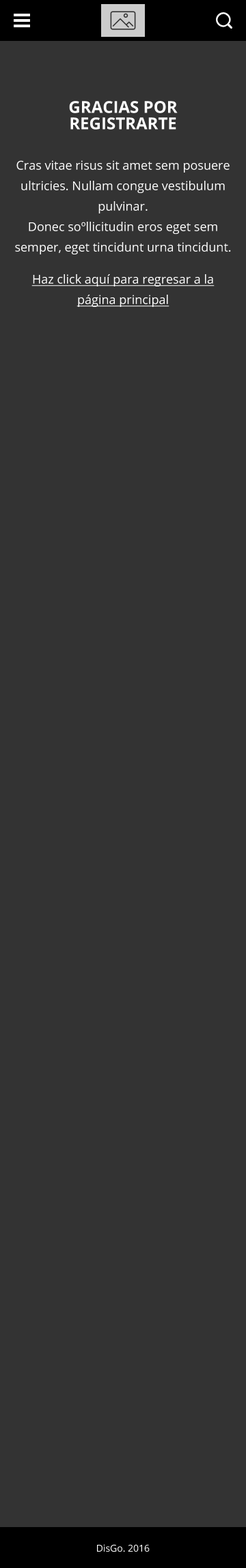
<style>
.page{position:relative;width:246px;height:1568px;background:#333333}
.page>*{position:absolute;margin:0}
.t1{font:16.4px/16.4px "OpenSans-Bold";color:#ffffff;text-transform:uppercase}
.t2{font:12.3px/20.5px "OpenSans";color:#ffffff}
.t3{font:12.3px/20.5px "OpenSans";color:#ffffff;text-decoration:underline}
.t4{font:9.5px "OpenSans";color:#ffffff}
</style>
<div class="page">
<p class="t1" style="left:69px;top:101px;width:108px;height:29px;text-align:center">Gracias por registrarte</p>
<p class="t2" style="left:15px;top:160px;width:216px;height:94px;text-align:center">Cras vitae risus sit amet sem posuere ultricies. Nullam congue vestibulum pulvinar.<br>Donec soºllicitudin eros eget sem semper, eget tincidunt urna tincidunt.</p>
<p class="t3" style="left:31px;top:274px;width:183px;height:33px;text-align:center">Haz click aquí para regresar a la página principal</p>
<p class="t4" style="left:97px;top:1544px;width:52px;height:8px">DisGo. 2016</p>
</div>
